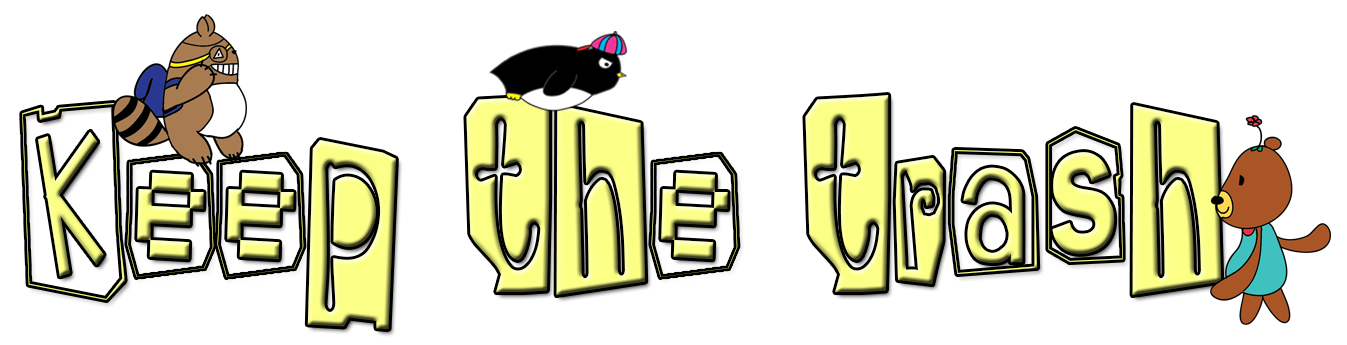
<style>
.page{position:relative;width:1347px;height:345px;background:#ffffff}
.page>*{position:absolute;margin:0}
.t1{font:265.7px "AHLuGDeKR1.000";color:#fbff85;scale:0.7 1}
</style>
<div class="page">
<p class="t1" style="left:22px;top:95px;width:1200px;height:234px">Keep the trash</p>
</div>
